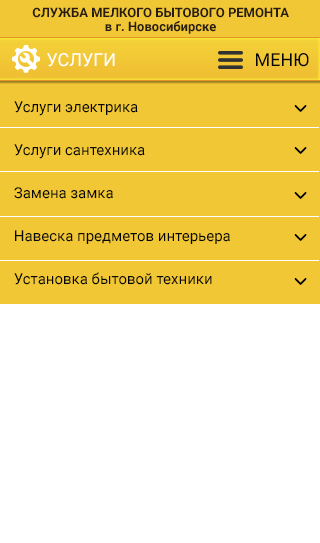
<style>
.page{position:relative;width:320px;height:543px;background:#ffffff}
.page>*{position:absolute;margin:0}
.t1{font:13px/14px "Roboto-Bold";color:#281d12;text-transform:uppercase}
.t2{font:13px/14px "Roboto-Bold";color:#281d12}
.t3{font:18px "Roboto-Regular";color:#ffffff;text-transform:uppercase}
.t4{font:18px "Roboto-Regular";color:#050505;text-transform:uppercase}
.t5{font:15px "Roboto-Regular";color:#050505}
</style>
<div class="page">
<p class="t1" style="left:32px;top:7px;width:257px;height:27px;text-align:center">служба мелкого бытового ремонта<br><span class="t2">в г. Новосибирске</span></p>
<p class="t3" style="left:47px;top:53px;width:68px;height:14px">услуги</p>
<p class="t4" style="left:256px;top:53px;width:53px;height:14px">меню</p>
<p class="t5" style="left:14px;top:101px;width:216px;height:184px">Услуги электрика<br>Услуги сантехника<br>Замена замка<br>Навеска предметов интерьера<br>Установка бытовой техники</p>
</div>
